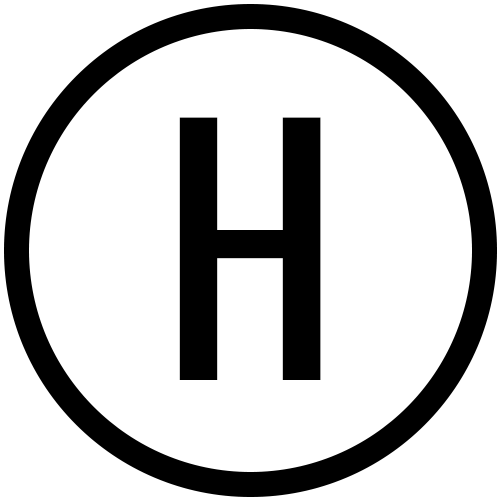
<style>
.page{position:relative;width:500px;height:500px;background:#ffffff}
.page>*{position:absolute;margin:0}
.t1{font:300px "Oswald-Regular";color:#000000}
</style>
<div class="page">
<p class="t1" style="left:179px;top:117px;width:142px;height:263px">H</p>
</div>
